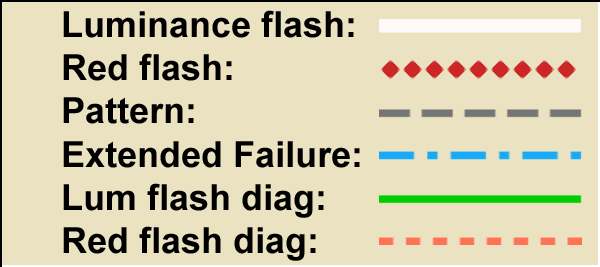
<style>
.page{position:relative;width:600px;height:267px;background:#ebe2c2}
.page>*{position:absolute;margin:0}
.t1{font:36px "Arial-BoldMT";color:#000000}
</style>
<div class="page">
<p class="t1" style="left:63px;top:10px;width:297px;height:251px">Luminance flash:<br>Red flash:<br>Pattern:<br>Extended Failure:<br>Lum flash diag:<br>Red flash diag:</p>
</div>
